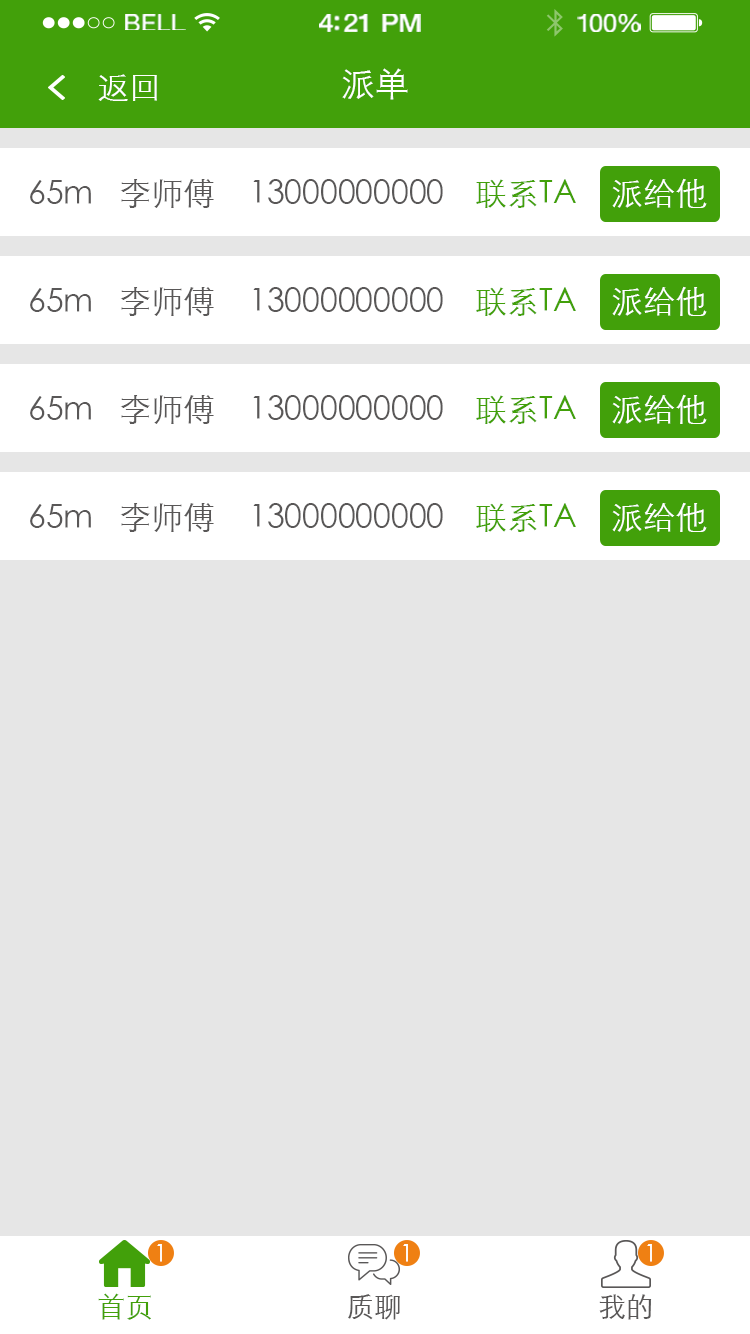
<style>
.page{position:relative;width:750px;height:1334px;background:#e6e6e6}
.page>*{position:absolute;margin:0}
.t1{font:23.3px "HelveticaNeue";letter-spacing:0.02em;color:#ffffff;scale:1.06 1}
.t2{font:25.3px "HelveticaNeue-Medium";letter-spacing:-0.02em;color:#ffffff;scale:1.06 1}
.t3{font:24.3px "HelveticaNeue";letter-spacing:-0.02em;color:#ffffff;scale:1.06 1}
.t4{font:32px "STXihei";color:#ffffff}
.t5{font:34px "STXihei";color:#ffffff}
.t6{font:32px "STXihei";color:#595757}
.t7{font:32px "STXihei";color:#42a00a}
.t8{font:24px "STXihei";color:#ffffff}
.t9{font:28px "STXihei";color:#42a00a}
.t10{font:28px "STXihei";color:#595757}
</style>
<div class="page">
<p class="t1" style="left:125px;top:14px;width:61px;height:16px">BELL</p>
<p class="t2" style="left:319px;top:14px;width:102px;height:18px">4:21 PM</p>
<p class="t3" style="left:577px;top:14px;width:64px;height:18px">100%</p>
<p class="t4" style="left:98px;top:74px;width:59px;height:27px">返回</p>
<p class="t5" style="left:342px;top:68px;width:66px;height:32px">派单</p>
<p class="t6" style="left:30px;top:180px;width:61px;height:24px">65m</p>
<p class="t6" style="left:120px;top:179px;width:94px;height:29px">李师傅</p>
<p class="t6" style="left:253px;top:179px;width:190px;height:25px">13000000000</p>
<p class="t7" style="left:476px;top:179px;width:100px;height:29px">联系TA</p>
<p class="t4" style="left:612px;top:178px;width:95px;height:30px">派给他</p>
<p class="t6" style="left:30px;top:288px;width:61px;height:24px">65m</p>
<p class="t6" style="left:120px;top:287px;width:94px;height:29px">李师傅</p>
<p class="t6" style="left:253px;top:287px;width:190px;height:25px">13000000000</p>
<p class="t7" style="left:476px;top:287px;width:100px;height:29px">联系TA</p>
<p class="t4" style="left:612px;top:286px;width:95px;height:30px">派给他</p>
<p class="t6" style="left:30px;top:396px;width:61px;height:24px">65m</p>
<p class="t6" style="left:120px;top:395px;width:94px;height:29px">李师傅</p>
<p class="t6" style="left:253px;top:395px;width:190px;height:25px">13000000000</p>
<p class="t7" style="left:476px;top:395px;width:100px;height:29px">联系TA</p>
<p class="t4" style="left:612px;top:394px;width:95px;height:30px">派给他</p>
<p class="t6" style="left:30px;top:504px;width:61px;height:24px">65m</p>
<p class="t6" style="left:120px;top:503px;width:94px;height:29px">李师傅</p>
<p class="t6" style="left:253px;top:503px;width:190px;height:25px">13000000000</p>
<p class="t7" style="left:476px;top:503px;width:100px;height:29px">联系TA</p>
<p class="t4" style="left:612px;top:502px;width:95px;height:30px">派给他</p>
<p class="t8" style="left:157px;top:1244px;width:5px;height:18px">1</p>
<p class="t8" style="left:403px;top:1244px;width:5px;height:18px">1</p>
<p class="t8" style="left:647px;top:1244px;width:5px;height:18px">1</p>
<p class="t9" style="left:98px;top:1293px;width:53px;height:27px">首页</p>
<p class="t10" style="left:348px;top:1294px;width:52px;height:26px">质聊</p>
<p class="t10" style="left:599px;top:1294px;width:53px;height:26px">我的</p>
</div>
